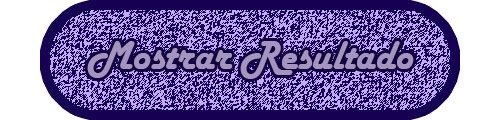
<style>
.page{position:relative;width:500px;height:120px;background:#150051}
.page>*{position:absolute;margin:0}
.t1{font:42px "HarlowSolid";color:#a495c0}
</style>
<div class="page">
<p class="t1" style="left:87px;top:41px;width:327px;height:38px">Mostrar Resultado</p>
</div>
